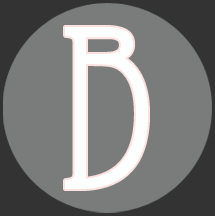
<style>
.page{position:relative;width:215px;height:216px;background:#7a7b7b}
.page>*{position:absolute;margin:0}
.t1{font:228.7px "EccentricStd";color:#fdffff}
</style>
<div class="page">
<p class="t1" style="left:65px;top:27px;width:83px;height:162px">B</p>
</div>
